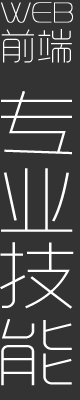
<style>
.page{position:relative;width:80px;height:400px;background:#333333}
.page>*{position:absolute;margin:0}
.t1{font:28.6px/24px "Venera100";letter-spacing:-0.05em;color:#ffffff;font-weight:bold;scale:0.77 1}
.t2{font:36px/36px "RTWSYueGoTrial-ExLight";letter-spacing:0.025em;color:#ffffff}
.t3{font:72px/76px "RTWSYueGoTrial-ExLight";letter-spacing:0.1em;color:#ffffff;scale:1.1 1}
</style>
<div class="page">
<p class="t1" style="left:1px;top:2px;width:72px;height:61px">Web<br><span class="t2">前端</span></p>
<p class="t3" style="left:0px;top:91px;width:74px;height:295px">专<br>业<br>技<br>能</p>
</div>
